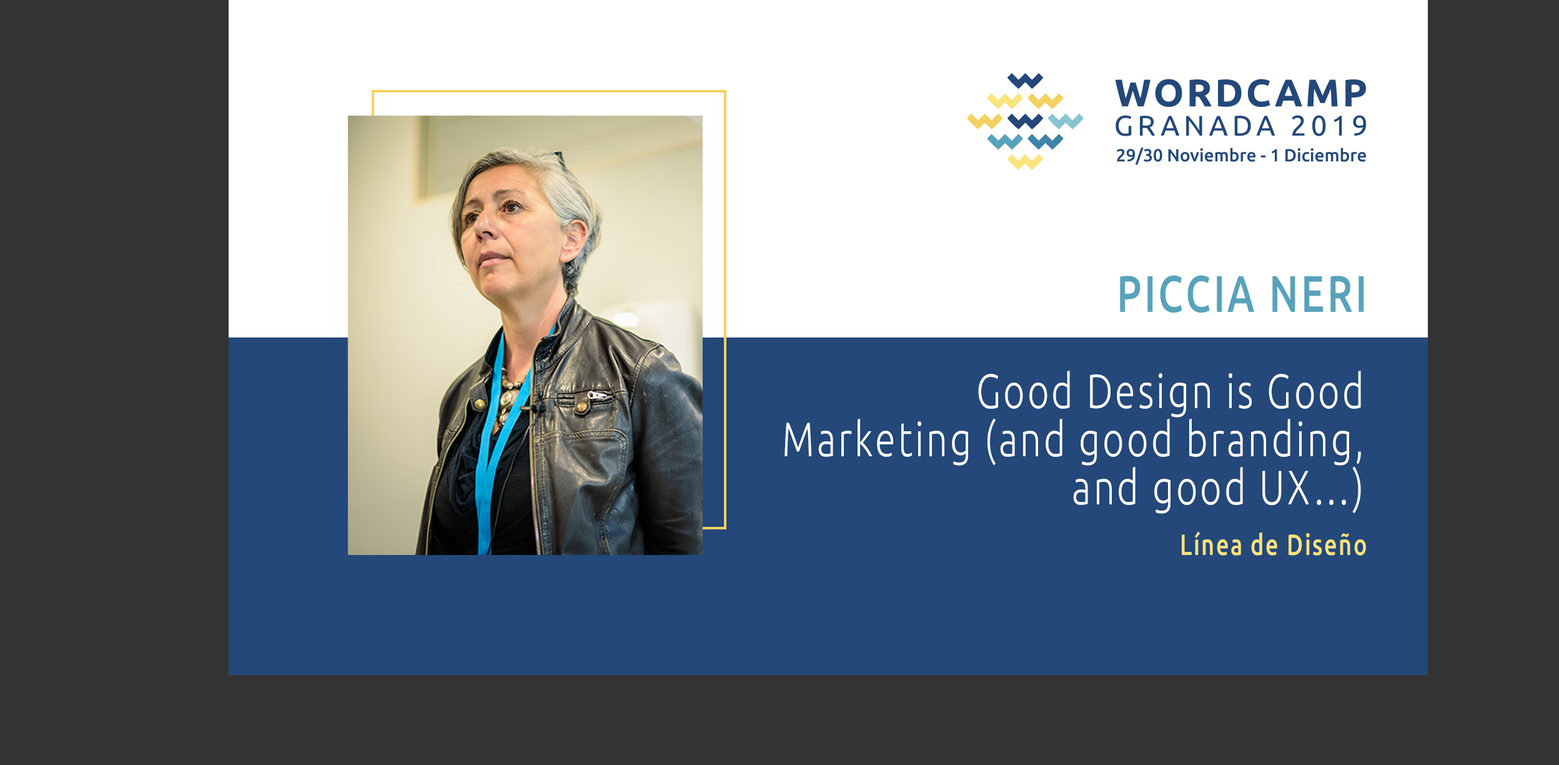
<style>
.page{position:relative;width:1559px;height:765px;background:#333333}
.page>*{position:absolute;margin:0}
.t1{font:51.4px "Ubuntu-Medium";letter-spacing:0.068em;color:#57a3bb;text-transform:uppercase;scale:0.77 1}
.t2{font:48.2px/48.2px "Ubuntu-Light";letter-spacing:0.068em;color:#ffffff;scale:0.77 1}
.t3{font:29.2px "Ubuntu-Medium";letter-spacing:0.068em;color:#f9e37b;scale:0.77 1}
</style>
<div class="page">
<p class="t1" style="left:1120px;top:275px;width:244px;height:38px">Piccia Neri</p>
<p class="t2" style="left:785px;top:370px;width:576px;height:144px;text-align:right">Good Design is Good Marketing (and good branding, and good UX…)</p>
<p class="t3" style="left:1182px;top:531px;width:184px;height:24px">Línea de Diseño</p>
</div>
